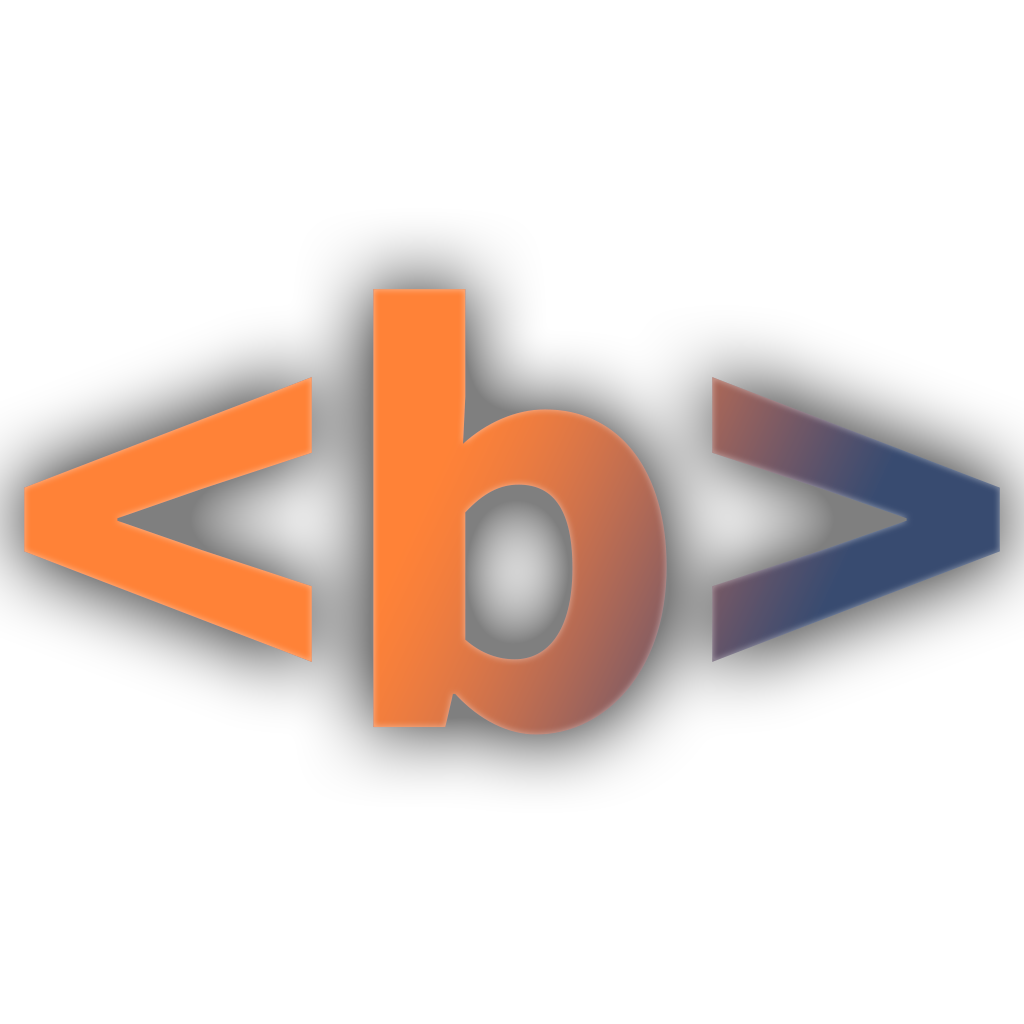
<style>
.page{position:relative;width:1024px;height:1024px;background:#ffffff}
.page>*{position:absolute;margin:0}
.t1{font:625px "SourceSans3Roman-Bold"}
</style>
<div class="page">
<p class="t1" style="left:24px;top:289px;width:976px;height:446px">&lt;b&gt;</p>
<p class="t1" style="left:24px;top:289px;width:976px;height:446px">&lt;b&gt;</p>
</div>
